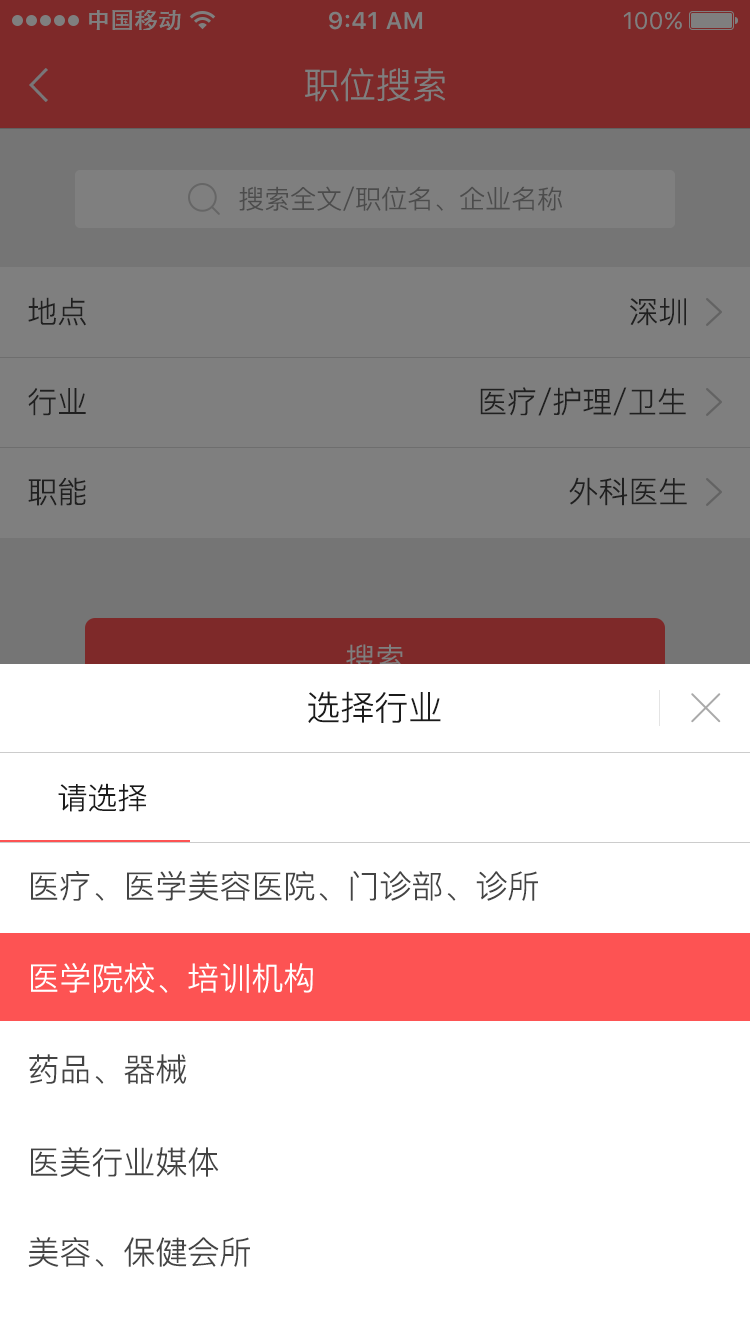
<style>
.page{position:relative;width:750px;height:1334px;background:#ffffff}
.page>*{position:absolute;margin:0}
.t1{font:36px "PingFang-SC-Regular";color:#7f7f7f}
.t2{font:26px "PingFang-SC-Regular";color:#4c4c4c}
.t3{font:30px "PingFang-SC-Regular";color:#202020}
.t4{font:34px "PingFang-SC-Regular";color:#1b1b1b}
.t5{font:30px "PingFang-SC-Regular";color:#1b1b1b}
.t6{font:32px "PingFang-SC-Regular";color:#444444}
.t7{font:32px "PingFang-SC-Regular";color:#ffffff}
</style>
<div class="page">
<p class="t1" style="left:305px;top:68px;width:140px;height:34px">职位搜索</p>
<p class="t2" style="left:239px;top:186px;width:323px;height:25px">搜索全文/职位名、企业名称</p>
<p class="t3" style="left:28px;top:297px;width:58px;height:29px">地点</p>
<p class="t3" style="left:630px;top:298px;width:56px;height:28px">深圳</p>
<p class="t3" style="left:28px;top:388px;width:58px;height:28px">行业</p>
<p class="t3" style="left:480px;top:387px;width:206px;height:29px">医疗/护理/卫生</p>
<p class="t3" style="left:28px;top:477px;width:58px;height:29px">职能</p>
<p class="t3" style="left:569px;top:477px;width:118px;height:29px">外科医生</p>
<p class="t4" style="left:308px;top:691px;width:133px;height:32px">选择行业</p>
<p class="t5" style="left:58px;top:783px;width:89px;height:29px">请选择</p>
<p class="t6" style="left:31px;top:871px;width:507px;height:30px">医疗、医学美容医院、门诊部、诊所</p>
<p class="t7" style="left:31px;top:963px;width:282px;height:30px">医学院校、培训机构</p>
<p class="t6" style="left:29px;top:1054px;width:158px;height:30px">药品、器械</p>
<p class="t6" style="left:31px;top:1147px;width:188px;height:30px">医美行业媒体</p>
<p class="t6" style="left:28px;top:1237px;width:222px;height:30px">美容、保健会所</p>
</div>
